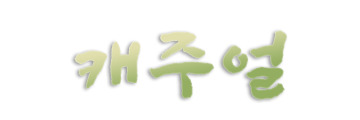
<style>
.page{position:relative;width:360px;height:120px;background:#ffffff}
.page>*{position:absolute;margin:0}
.t1{font:77.3px "SangSangRockOTF";letter-spacing:0.12em}
</style>
<div class="page">
<p class="t1" style="left:75px;top:31px;width:212px;height:68px">캐주얼</p>
</div>
